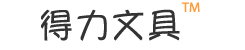
<style>
.page{position:relative;width:245px;height:50px;background:#ffffff}
.page>*{position:absolute;margin:0}
.t1{font:14px "MyriadPro-Regular";color:#ff9933}
.t2{font:36px "YuppySC-Regular";color:#333333}
</style>
<div class="page">
<p class="t1" style="left:181px;top:2px;width:19px;height:10px">TM</p>
<p class="t2" style="left:41px;top:9px;width:139px;height:32px">得力文具</p>
</div>
